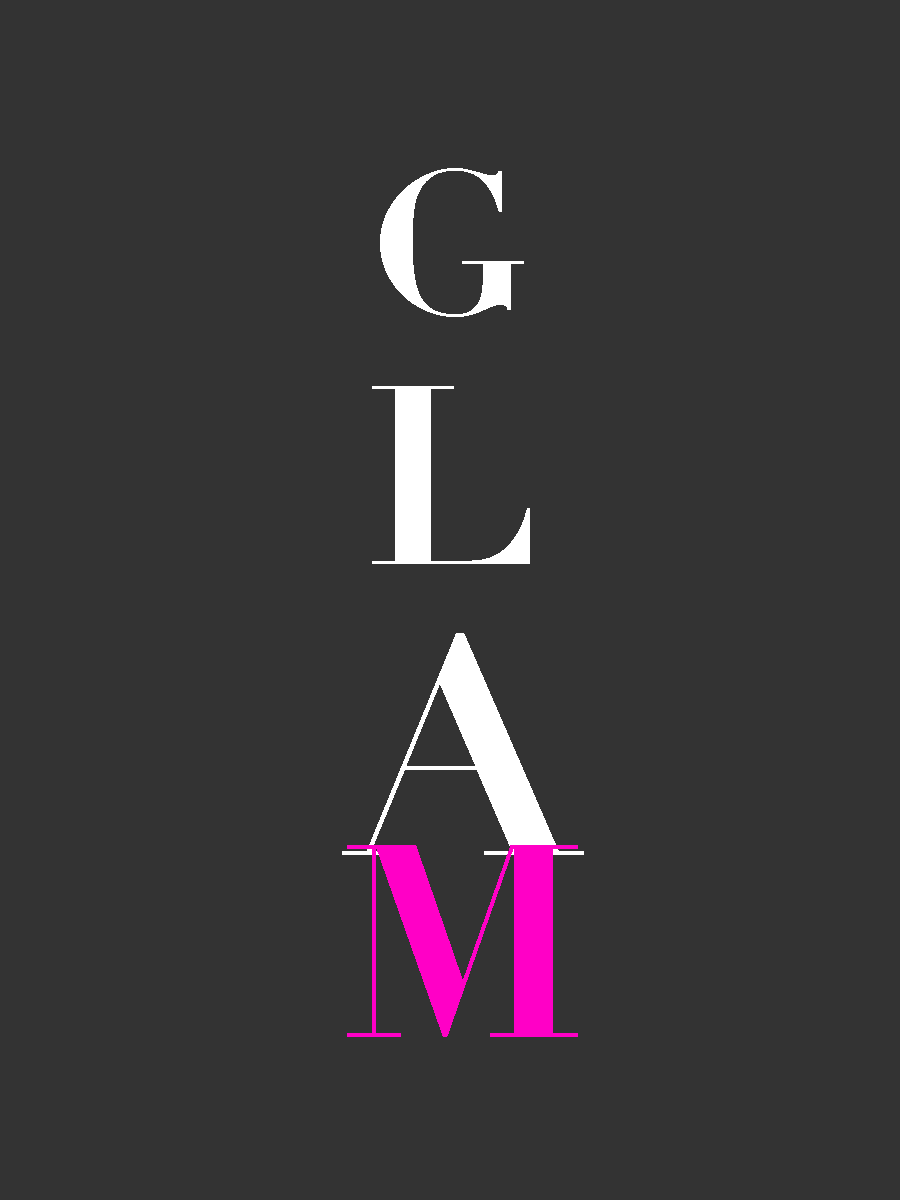
<style>
.page{position:relative;width:900px;height:1200px;background:#333333}
.page>*{position:absolute;margin:0}
.t1{font:200px "Didot-Bold";color:#ffffff}
.t2{font:300px "Didot-Bold";color:#ffffff}
.t3{font:269.1px "Didot-Bold";color:#ff00c6}
</style>
<div class="page">
<p class="t1" style="left:380px;top:168px;width:144px;height:149px">G</p>
<p class="t2" style="left:342px;top:633px;width:242px;height:222px">A</p>
<p class="t3" style="left:347px;top:845px;width:231px;height:192px">M</p>
</div>
